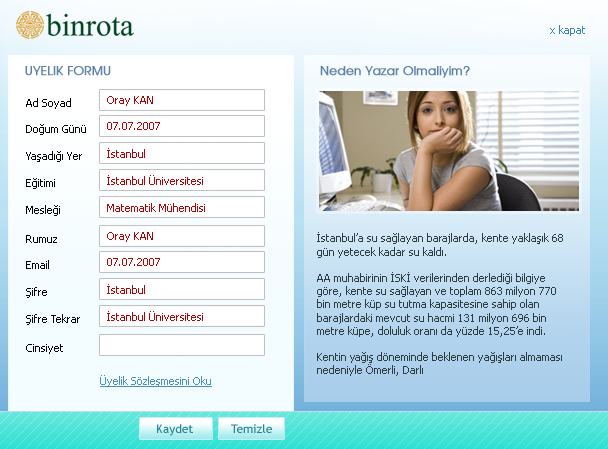
<style>
.page{position:relative;width:608px;height:449px}
.page>*{position:absolute;margin:0}
.t1{font:11px "Tahoma";color:#3f82ad}
.t2{font:12px "TRAvalonPlain";color:#5e82a6;font-weight:bold}
.t3{font:11px "Tahoma";color:#000000}
.t4{font:11px "Tahoma";color:#ad0505}
.t5{font:11px "Tahoma";color:#2e3c3f}
.t6{font:11px "Tahoma";color:#478ec8;text-decoration:underline}
.t7{font:12px "TrebuchetMS";color:#288493}
</style>
<div class="page">
<p class="t1" style="left:550px;top:25px;width:35px;height:11px">x kapat</p>
<p class="t2" style="left:25px;top:66px;width:86px;height:10px">UYELIK FORMU</p>
<p class="t2" style="left:320px;top:66px;width:150px;height:12px">Neden Yazar Olmaliyim?</p>
<p class="t3" style="left:26px;top:98px;width:45px;height:11px">Ad Soyad</p>
<p class="t4" style="left:107px;top:96px;width:46px;height:10px">Oray KAN</p>
<p class="t3" style="left:26px;top:124px;width:60px;height:11px">Doğum Günü</p>
<p class="t4" style="left:107px;top:122px;width:53px;height:8px">07.07.2007</p>
<p class="t4" style="left:107px;top:148px;width:38px;height:10px">İstanbul</p>
<p class="t3" style="left:26px;top:151px;width:56px;height:11px">Yaşadığı Yer</p>
<p class="t3" style="left:26px;top:178px;width:29px;height:11px">Eğitimi</p>
<p class="t4" style="left:107px;top:175px;width:96px;height:10px">İstanbul Üniversitesi</p>
<p class="t3" style="left:26px;top:205px;width:34px;height:11px">Mesleği</p>
<p class="t4" style="left:107px;top:203px;width:98px;height:9px">Matematik Mühendisi</p>
<p class="t4" style="left:107px;top:232px;width:46px;height:10px">Oray KAN</p>
<p class="t5" style="left:317px;top:232px;width:246px;height:144px">İstanbul’a su sağlayan barajlarda, kente yaklaşık 68 gün yetecek kadar su kaldı.<br><br>AA muhabirinin İSKİ verilerinden derlediği bilgiye göre, kente su sağlayan ve toplam 863 milyon 770 bin metre küp su tutma kapasitesine sahip olan barajlardaki mevcut su hacmi 131 milyon 696 bin metre küpe, doluluk oranı da yüzde 15,25’e indi.<br><br>Kentin yağış döneminde beklenen yağışları almaması nedeniyle Ömerli, Darlı</p>
<p class="t3" style="left:26px;top:235px;width:31px;height:8px">Rumuz</p>
<p class="t3" style="left:26px;top:260px;width:23px;height:9px">Email</p>
<p class="t4" style="left:107px;top:258px;width:53px;height:8px">07.07.2007</p>
<p class="t3" style="left:26px;top:287px;width:21px;height:11px">Şifre</p>
<p class="t4" style="left:107px;top:284px;width:38px;height:10px">İstanbul</p>
<p class="t3" style="left:26px;top:314px;width:54px;height:11px">Şifre Tekrar</p>
<p class="t4" style="left:107px;top:311px;width:96px;height:10px">İstanbul Üniversitesi</p>
<p class="t3" style="left:26px;top:344px;width:37px;height:10px">Cinsiyet</p>
<p class="t6" style="left:100px;top:375px;width:112px;height:12px">Üyelik Sözleşmesini Oku</p>
<p class="t7" style="left:157px;top:424px;width:36px;height:12px">Kaydet</p>
<p class="t7" style="left:231px;top:424px;width:41px;height:9px">Temizle</p>
</div>
